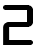
<style>
.page{position:relative;width:35px;height:50px;background:#ffffff}
.page>*{position:absolute;margin:0}
.t1{font:61.9px "OCRAExtended";color:#000000;scale:1.16 1}
</style>
<div class="page">
<p class="t1" style="left:3px;top:5px;width:30px;height:40px">2</p>
</div>
